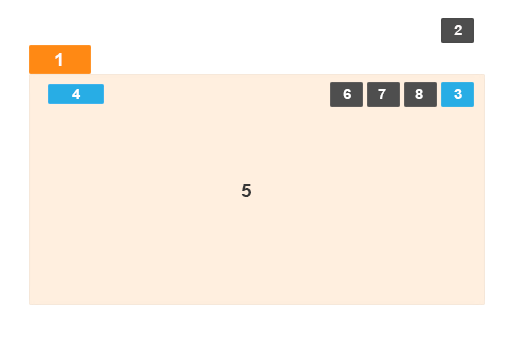
<style>
.page{position:relative;width:511px;height:338px;background:#ffefdf}
.page>*{position:absolute;margin:0}
.t1{font:14px "Arial-BoldMT";letter-spacing:-0.025em;color:#fdfafa;scale:1.06 1}
.t2{font:18px "Arial-BoldMT";letter-spacing:-0.025em;color:#fdfdfc;scale:1.06 1}
.t3{font:14px "Arial-BoldMT";letter-spacing:-0.025em;color:#ffffff;scale:1.06 1}
.t4{font:17.8px "Arial-BoldMT";letter-spacing:-0.025em;color:#373737;scale:1.06 1}
</style>
<div class="page">
<p class="t1" style="left:454px;top:25px;width:8px;height:10px">2</p>
<p class="t2" style="left:55px;top:53px;width:7px;height:13px">1</p>
<p class="t3" style="left:72px;top:89px;width:9px;height:10px">4</p>
<p class="t3" style="left:343px;top:89px;width:8px;height:10px">6</p>
<p class="t3" style="left:378px;top:89px;width:8px;height:10px">7</p>
<p class="t3" style="left:415px;top:89px;width:8px;height:10px">8</p>
<p class="t3" style="left:454px;top:89px;width:8px;height:10px">3</p>
<p class="t4" style="left:241px;top:184px;width:10px;height:13px">5</p>
</div>
